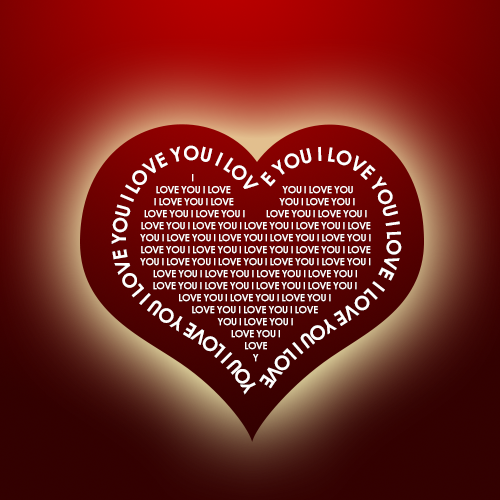
<style>
.page{position:relative;width:500px;height:500px}
.page>*{position:absolute;margin:0}
.t1{font:19.5px "CenturyGothic-Bold";letter-spacing:-0.05em;color:#ffffff}
.t2{font:10px "CenturyGothic-Bold";letter-spacing:-0.05em;color:#ffffff}
</style>
<div class="page">
<p class="t1" style="left:111px;top:145px;width:291px;height:250px;text-align:center">I LOVE YOU I LOVE YOU I LOVE YOU I LOVE YOU I LOVE YOU I LOV          E YOU I LOVE YOU I LOVE YOU I LOVE YOU I LOVE YOU</p>
<p class="t2" style="left:140px;top:174px;width:231px;height:188px;text-align:center">I LOVE YOU I LOVE YOU I LOVE YOU I LOVE YOU I LOVE YOU I LOVE YOU I LOVE YOU I LOVE YOU I LOVE YOU I LOVE YOU I LOVE YOU I LOVE YOU I LOVE YOU I LOVE YOU I LOVE YOU I LOVE YOU I LOVE YOU I LOVE YOU I LOVE YOU I LOVE YOU I LOVE YOU I LOVE YOU I LOVE YOU I LOVE YOU I LOVE YOU I LOVE YOU I LOVE YOU I LOVE YOU I LOVE YOU I LOVE YOU I LOVE YOU I LOVE YOU I LOVE YOU I LOVE YOU I LOVE YOU I LOVE YOU I LOVE YOU I LOVE YOU I LOVE YOU I LOVE YOU I LOVE YOU I LOVE YOU I LOVE YOU I LOVE YOU I LOVE YOU I LOVE YOU I LOVE YOU I LOVE YOU I LOVE YOU I LOVE YOU I LOVE YOU I LOVE YOU I LOVE YOU I LOVE YOU</p>
</div>
